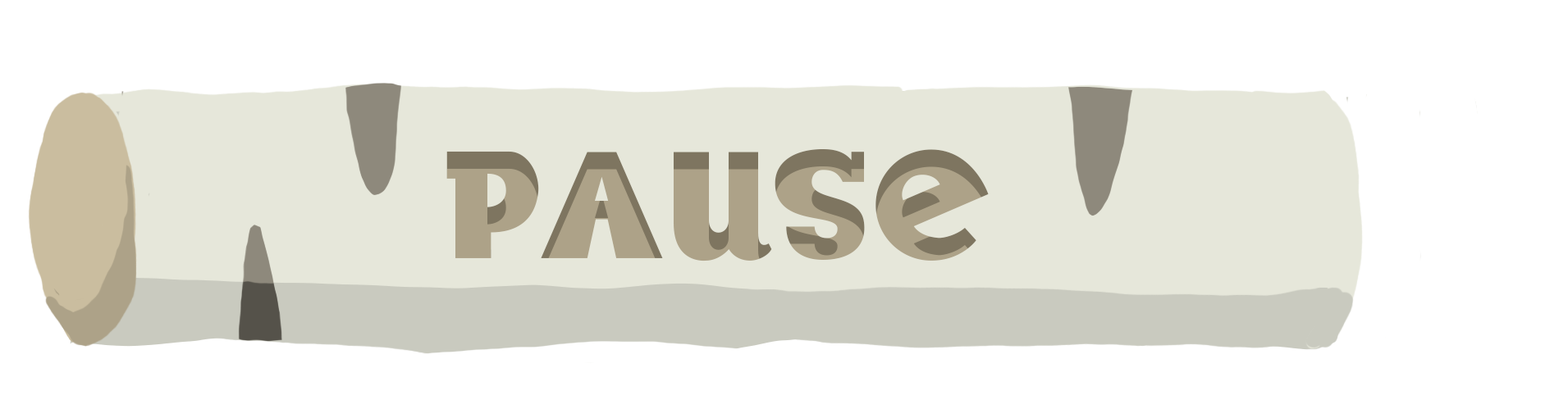
<style>
.page{position:relative;width:1568px;height:409px;background:#ffffff}
.page>*{position:absolute;margin:0}
.t1{font:148px "BadTyp-Regular";color:#ada288}
</style>
<div class="page">
<p class="t1" style="left:446px;top:149px;width:543px;height:113px">pause</p>
</div>
